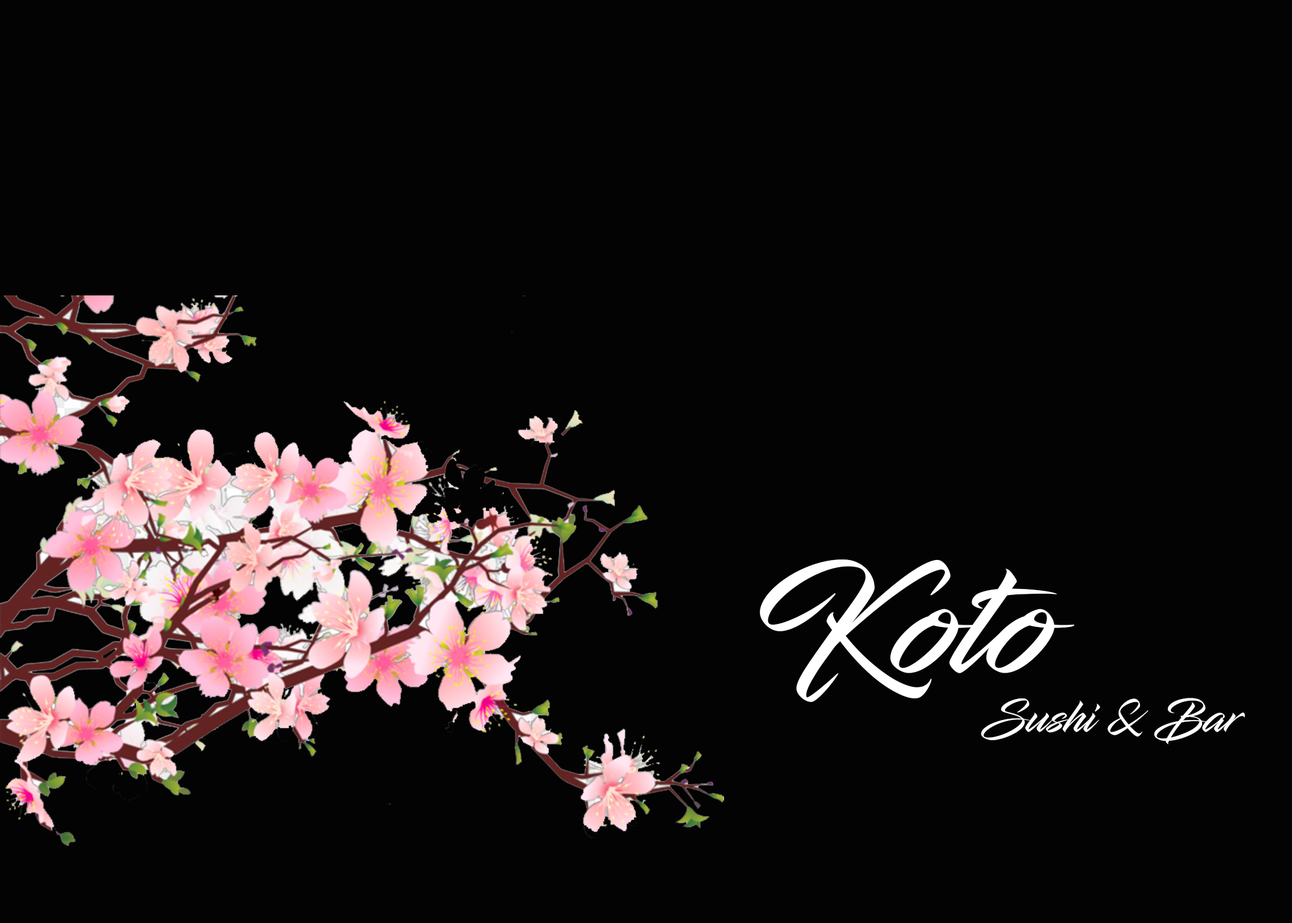
<style>
.page{position:relative;width:1292px;height:923px;background:#030303}
.page>*{position:absolute;margin:0}
.t1{font:153.8px "InfiniteStroke";color:#ffffff}
.t2{font:46.1px "InfiniteStroke";color:#ffffff}
</style>
<div class="page">
<p class="t1" style="left:760px;top:559px;width:315px;height:143px">Koto</p>
<p class="t2" style="left:981px;top:698px;width:264px;height:46px">Sushi &amp; Bar</p>
</div>
